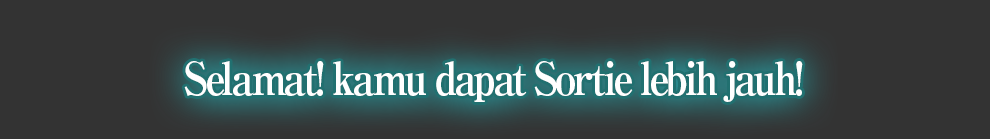
<style>
.page{position:relative;width:990px;height:139px;background:#333333}
.page>*{position:absolute;margin:0}
.t1{font:45px "RyuminPro-ExBold";letter-spacing:-0.08em;color:#ffffff;scale:0.9 1}
</style>
<div class="page">
<p class="t1" style="left:184px;top:61px;width:619px;height:41px">Selamat! kamu dapat Sortie lebih jauh!</p>
</div>
